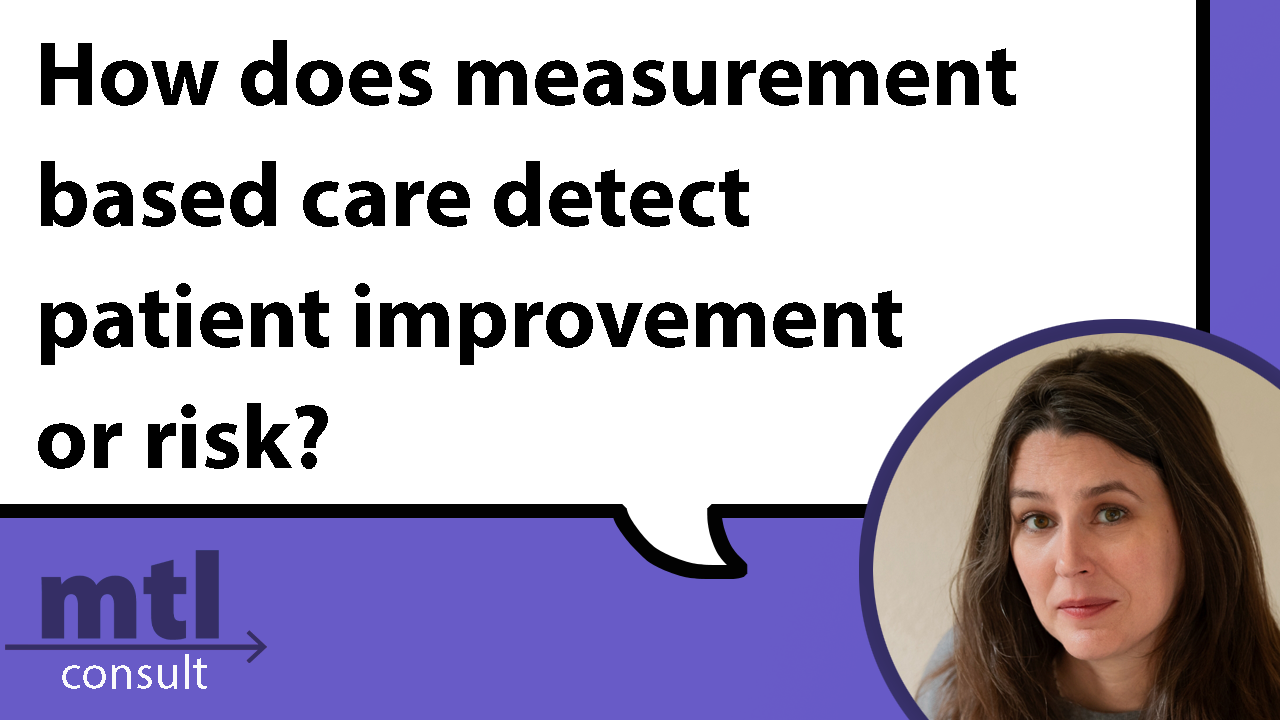
<style>
.page{position:relative;width:1280px;height:720px;background:#ffffff}
.page>*{position:absolute;margin:0}
.t1{font:91.7px "MyriadPro-Bold";color:#000000}
</style>
<div class="page">
<p class="t1" style="left:38px;top:40px;width:978px;height:429px">How does measurement <br>based care detect <br>patient improvement <br>or risk?</p>
</div>
